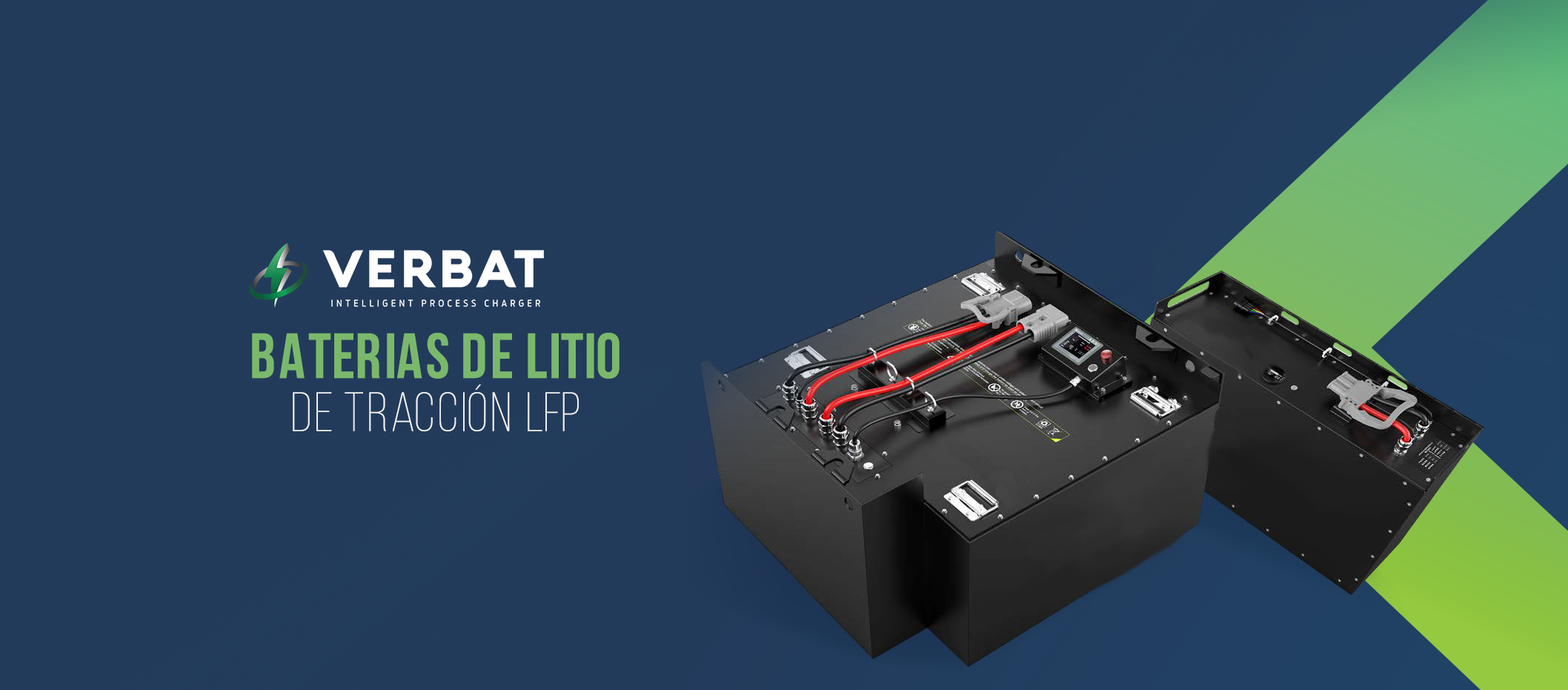
<style>
.page{position:relative;width:1568px;height:690px;background:#233b5b}
.page>*{position:absolute;margin:0}
.t1{font:63.7px "BebasNeueBold";color:#7ab96c;text-transform:uppercase;font-weight:bold}
.t2{font:55.3px/53.1px "BebasNeueLight";color:#f1f1f3;text-transform:uppercase;font-weight:bold}
</style>
<div class="page">
<p class="t1" style="left:252px;top:333px;width:367px;height:98px;text-align:center">BATERIAS DE LITIO<br><span class="t2">de tracciÓN LFP</span></p>
</div>
